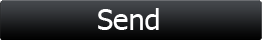
<style>
.page{position:relative;width:262px;height:41px}
.page>*{position:absolute;margin:0}
.t1{font:28.5px "Tahoma";color:#ffffff}
</style>
<div class="page">
<p class="t1" style="left:98px;top:8px;width:61px;height:22px">Send</p>
</div>
